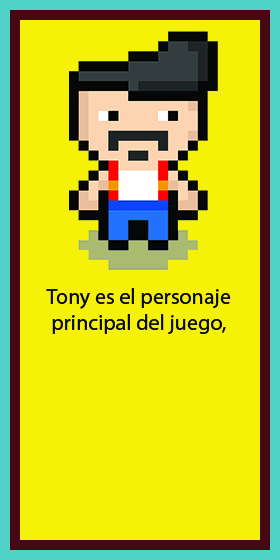
<style>
.page{position:relative;width:280px;height:560px;background:#f5f207}
.page>*{position:absolute;margin:0}
.t1{font:22px "MyriadPro-Regular";color:#060808}
</style>
<div class="page">
<p class="t1" style="left:46px;top:288px;width:185px;height:46px;text-align:center">Tony es el personaje <br>principal del juego,</p>
</div>
